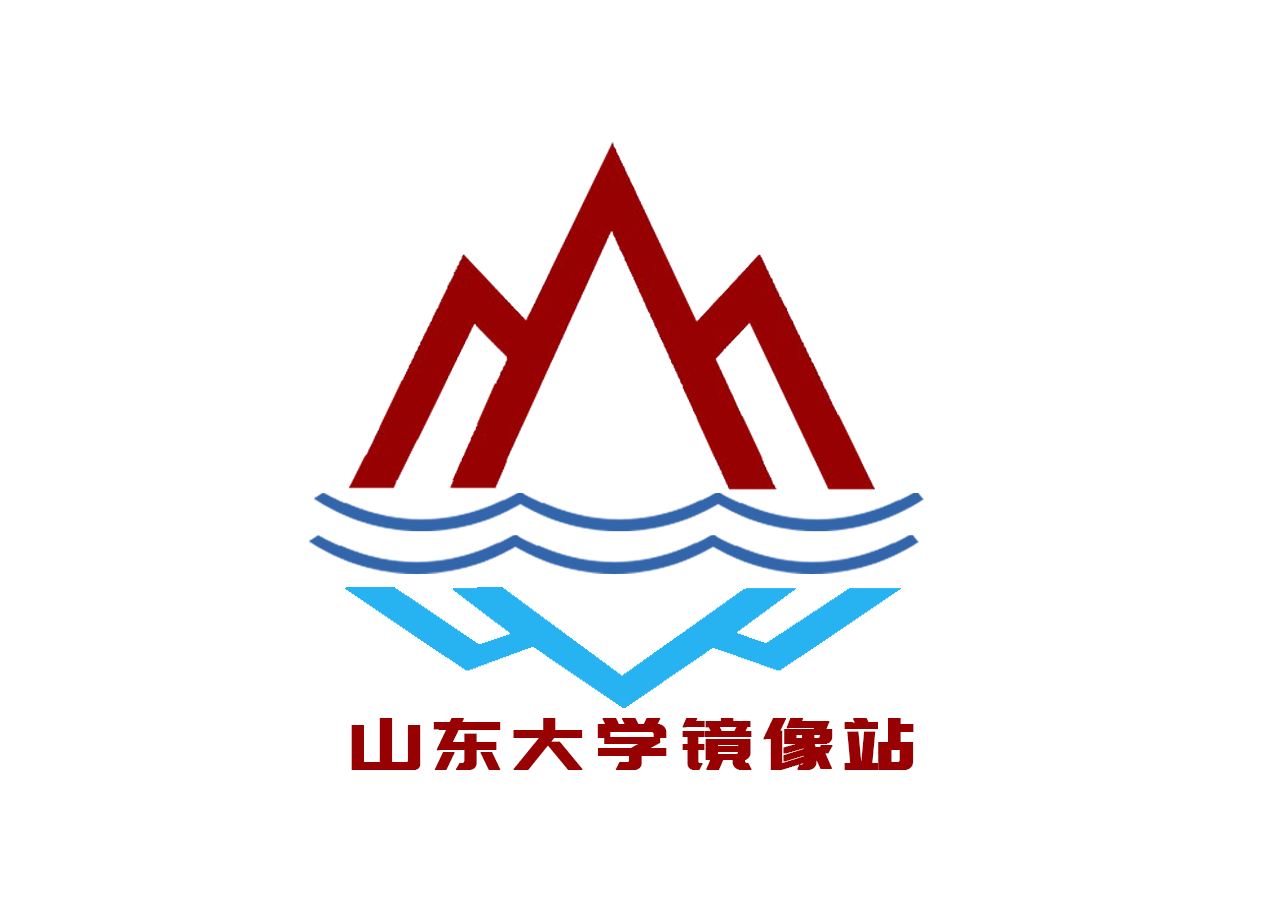
<style>
.page{position:relative;width:1280px;height:900px;background:#ffffff}
.page>*{position:absolute;margin:0}
.t1{font:70.8px "PangMenZhengDao";letter-spacing:0.12em;color:#970102;font-weight:bold;scale:1.07 1}
</style>
<div class="page">
<p class="t1" style="left:351px;top:718px;width:563px;height:52px">山东大学镜像站</p>
</div>
